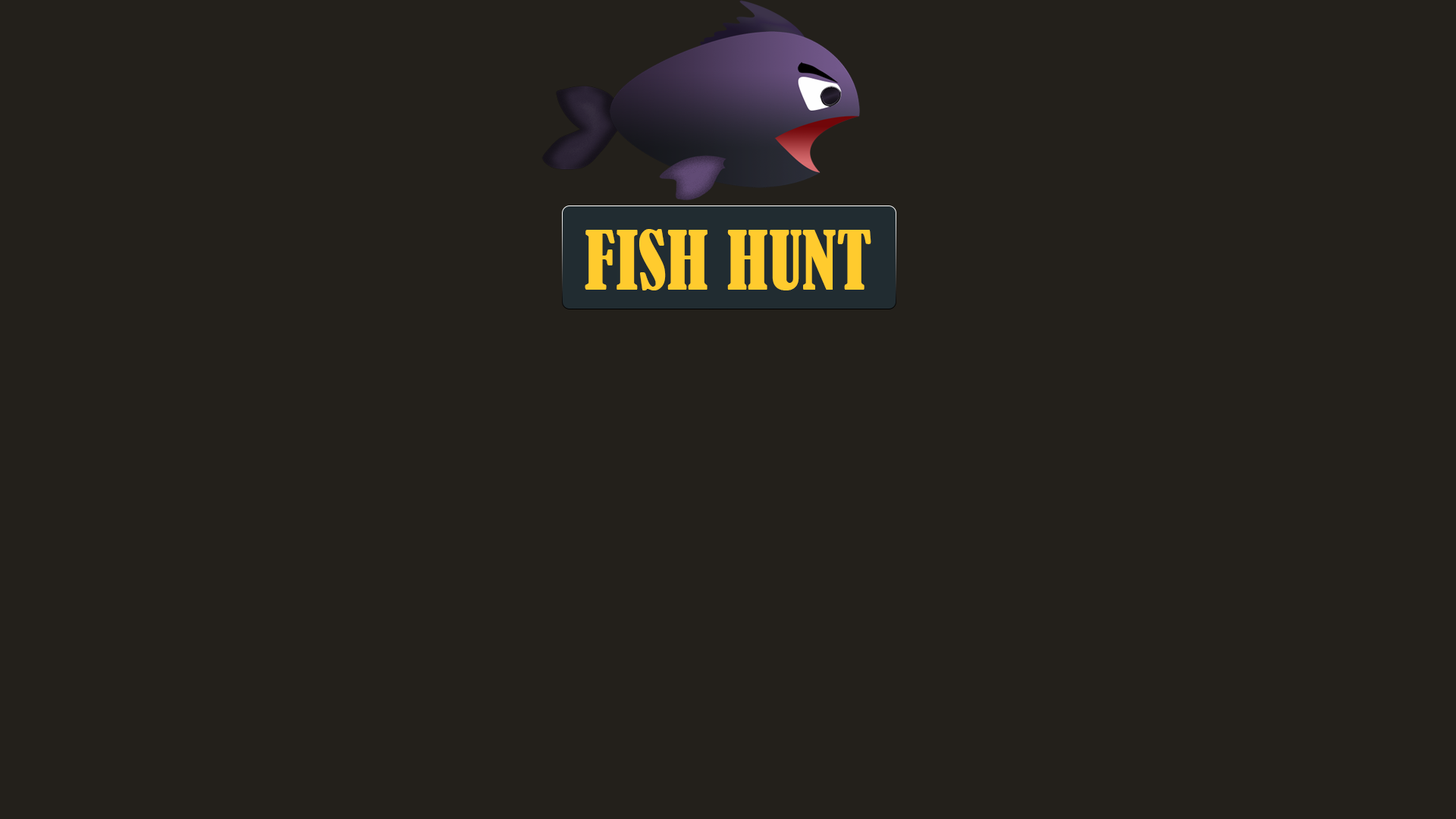
<style>
.page{position:relative;width:1456px;height:819px;background:#23201b}
.page>*{position:absolute;margin:0}
.t1{font:75.8px "BernardMT-Condensed";color:#ffcb2e}
</style>
<div class="page">
<p class="t1" style="left:585px;top:229px;width:286px;height:61px">FISH HUNT</p>
</div>
